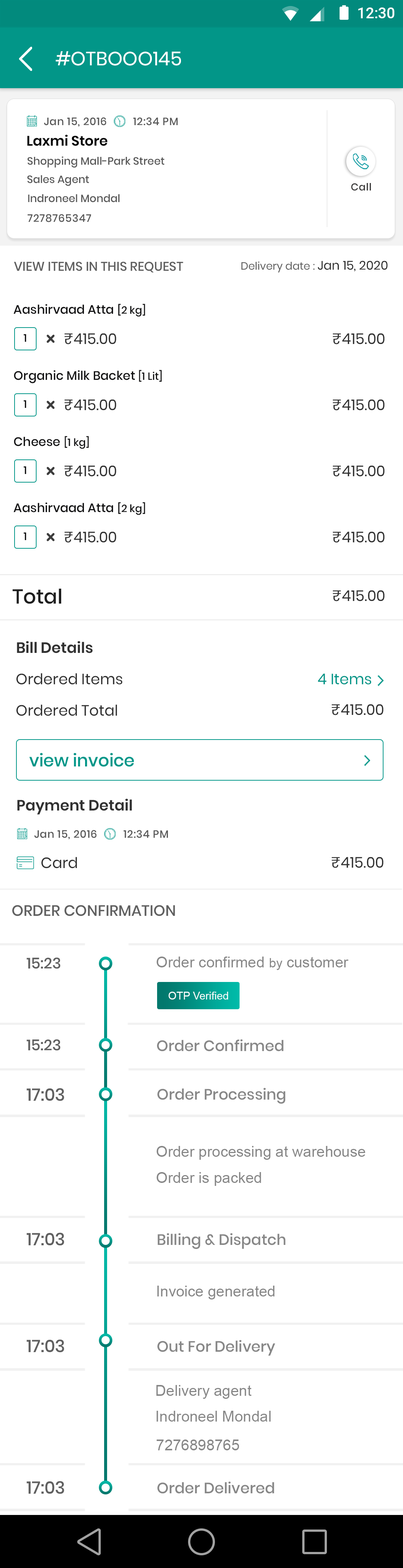
<style>
.page{position:relative;width:403px;height:1568px;background:#ffffff}
.page>*{position:absolute;margin:0}
.t1{font:15.4px "Roboto-Medium";color:#ffffff}
.t2{font:19.2px "Poppins-Regular";color:#ffffff}
.t3{font:10.6px "Poppins-Medium";letter-spacing:0.04em;color:#585858}
.t4{font:13.8px "Poppins-SemiBold";color:#000000}
.t5{font:10.6px "Poppins-Medium";color:#585858}
.t6{font:10.1px "Poppins-Medium";letter-spacing:0.04em;color:#3d3c3c}
.t7{font:12.7px "Poppins-Medium";color:#606060;text-transform:uppercase}
.t8{font:10.6px "Poppins-Regular";color:#606060}
.t9{font:12.3px "Poppins-Regular";color:#2b2b2b;text-transform:uppercase}
.t10{font:12.3px "Poppins-Regular";color:#2b2b2b}
.t11{font:12.3px "Poppins-Medium";color:#131314}
.t12{font:10.5px "Poppins-Medium";color:#131314}
.t13{font:10.8px "Poppins-Medium";color:#131314}
.t14{font:14.9px "Poppins-Regular";color:#313131}
.t15{font:20.2px "Poppins-Medium";color:#1e1e1e}
.t16{font:14.9px "Poppins-SemiBold";color:#313131}
.t17{font:14.9px "Poppins-Regular";color:#029688}
.t18{font:17.3px "Poppins-Medium";color:#029688}
.t19{font:15.1px "Poppins-Medium";color:#606060;text-transform:uppercase}
.t20{font:15.1px "ArialMT";color:#878787}
.t21{font:12.8px "ArialMT";color:#878787}
.t22{font:10.7px "ArialMT";color:#fefefe}
.t23{font:15.1px "Poppins-Medium";color:#878787}
.t24{font:17.3px "Poppins-Medium";color:#606060;text-transform:uppercase}
</style>
<div class="page">
<p class="t1" style="left:359px;top:7px;width:36px;height:11px">12:30</p>
<p class="t2" style="left:56px;top:51px;width:125px;height:15px">#OTBOOO145</p>
<p class="t3" style="left:44px;top:117px;width:134px;height:10px">Jan 15, 2016         12:34 PM</p>
<p class="t4" style="left:27px;top:134px;width:81px;height:12px">Laxmi Store</p>
<p class="t5" style="left:27px;top:157px;width:138px;height:11px">Shopping Mall-Park Street</p>
<p class="t5" style="left:27px;top:175px;width:62px;height:11px">Sales Agent</p>
<p class="t6" style="left:351px;top:183px;width:20px;height:8px">Call</p>
<p class="t5" style="left:28px;top:194px;width:92px;height:8px">Indroneel Mondal</p>
<p class="t3" style="left:28px;top:214px;width:63px;height:8px">7278765347</p>
<p class="t7" style="left:14px;top:261px;width:169px;height:12px">View items in this request</p>
<p class="t8" style="left:242px;top:261px;width:146px;height:12px">Delivery date : <span class="t9">j</span><span class="t10">an 15, 2020</span></p>
<p class="t11" style="left:13px;top:304px;width:132px;height:13px">Aashirvaad Atta <span class="t12">[2 kg]</span></p>
<p class="t13" style="left:24px;top:334px;width:2px;height:8px">1</p>
<p class="t14" style="left:65px;top:333px;width:52px;height:11px">₹415.00</p>
<p class="t14" style="left:333px;top:333px;width:52px;height:11px">₹415.00</p>
<p class="t11" style="left:14px;top:370px;width:148px;height:13px">Organic Milk Backet <span class="t12">[1 Lit]</span></p>
<p class="t13" style="left:24px;top:400px;width:2px;height:8px">1</p>
<p class="t14" style="left:65px;top:399px;width:52px;height:11px">₹415.00</p>
<p class="t14" style="left:333px;top:399px;width:52px;height:11px">₹415.00</p>
<p class="t11" style="left:14px;top:436px;width:75px;height:13px">Cheese <span class="t12">[1 kg]</span></p>
<p class="t13" style="left:24px;top:466px;width:2px;height:8px">1</p>
<p class="t14" style="left:65px;top:465px;width:52px;height:12px">₹415.00</p>
<p class="t14" style="left:333px;top:465px;width:52px;height:12px">₹415.00</p>
<p class="t11" style="left:13px;top:502px;width:132px;height:13px">Aashirvaad Atta <span class="t12">[2 kg]</span></p>
<p class="t13" style="left:24px;top:532px;width:2px;height:8px">1</p>
<p class="t14" style="left:65px;top:532px;width:52px;height:11px">₹415.00</p>
<p class="t14" style="left:333px;top:532px;width:52px;height:11px">₹415.00</p>
<p class="t15" style="left:12px;top:589px;width:49px;height:15px">Total</p>
<p class="t14" style="left:333px;top:590px;width:52px;height:11px">₹415.00</p>
<p class="t16" style="left:17px;top:641px;width:76px;height:12px">Bill Details</p>
<p class="t14" style="left:16px;top:673px;width:107px;height:12px">Ordered Items</p>
<p class="t17" style="left:318px;top:673px;width:54px;height:12px">4 Items</p>
<p class="t14" style="left:16px;top:704px;width:101px;height:12px">Ordered Total</p>
<p class="t14" style="left:332px;top:704px;width:52px;height:11px">₹415.00</p>
<p class="t18" style="left:29px;top:753px;width:105px;height:14px">view invoice</p>
<p class="t16" style="left:17px;top:799px;width:115px;height:16px">Payment Detail</p>
<p class="t3" style="left:34px;top:830px;width:134px;height:9px">Jan 15, 2016         12:34 PM</p>
<p class="t14" style="left:41px;top:857px;width:36px;height:11px">Card</p>
<p class="t14" style="left:332px;top:857px;width:52px;height:11px">₹415.00</p>
<p class="t19" style="left:12px;top:905px;width:163px;height:11px">order confirmation</p>
<p class="t19" style="left:27px;top:957px;width:34px;height:12px">15:23</p>
<p class="t20" style="left:157px;top:957px;width:192px;height:13px">Order confirmed <span class="t21">by</span> customer</p>
<p class="t22" style="left:168px;top:992px;width:61px;height:8px">OTP Verified</p>
<p class="t19" style="left:27px;top:1039px;width:34px;height:12px">15:23</p>
<p class="t23" style="left:157px;top:1039px;width:127px;height:12px">Order Confirmed</p>
<p class="t24" style="left:27px;top:1088px;width:37px;height:13px">17:03</p>
<p class="t23" style="left:157px;top:1088px;width:129px;height:16px">Order Processing</p>
<p class="t20" style="left:157px;top:1146px;width:209px;height:14px">Order processing at warehouse</p>
<p class="t20" style="left:157px;top:1172px;width:104px;height:14px">Order is packed</p>
<p class="t24" style="left:27px;top:1233px;width:37px;height:13px">17:03</p>
<p class="t23" style="left:158px;top:1233px;width:128px;height:16px">Billing &amp; Dispatch</p>
<p class="t20" style="left:157px;top:1286px;width:118px;height:13px">Invoice generated</p>
<p class="t24" style="left:27px;top:1339px;width:37px;height:13px">17:03</p>
<p class="t23" style="left:157px;top:1340px;width:119px;height:16px">Out For Delivery</p>
<p class="t20" style="left:157px;top:1385px;width:95px;height:14px">Delivery agent</p>
<p class="t20" style="left:157px;top:1411px;width:114px;height:11px">Indroneel Mondal</p>
<p class="t20" style="left:157px;top:1440px;width:82px;height:10px">7276898765</p>
<p class="t24" style="left:27px;top:1481px;width:37px;height:13px">17:03</p>
<p class="t23" style="left:157px;top:1481px;width:118px;height:13px">Order Delivered</p>
</div>
